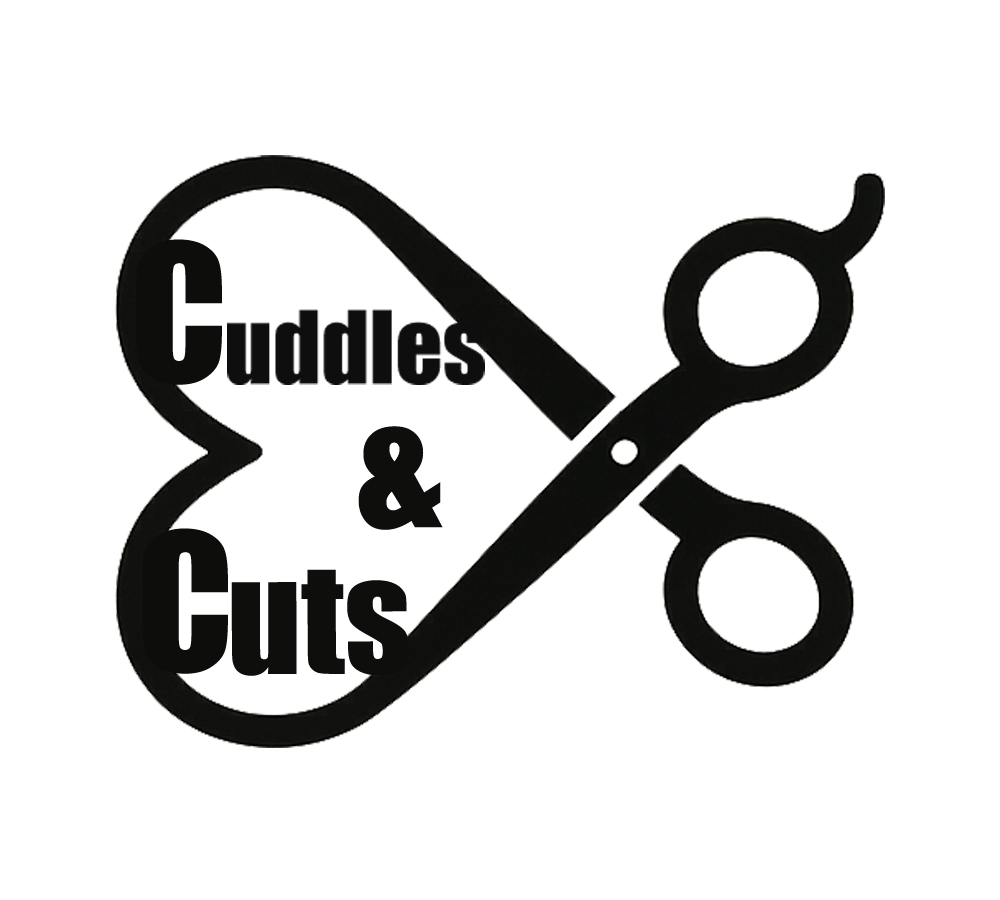
<style>
.page{position:relative;width:1000px;height:900px;background:#ffffff}
.page>*{position:absolute;margin:0}
.t1{font:175.9px "Impact";color:#0d0e0c}
.t2{font:149.4px "Impact";color:#0e0e0d}
.t3{font:141.4px "Impact";color:#0e0e0d}
</style>
<div class="page">
<p class="t1" style="left:136px;top:239px;width:86px;height:146px">C</p>
<p class="t2" style="left:358px;top:426px;width:85px;height:104px">&amp;</p>
<p class="t1" style="left:142px;top:528px;width:86px;height:146px">C</p>
<p class="t3" style="left:231px;top:569px;width:178px;height:107px">uts</p>
</div>
